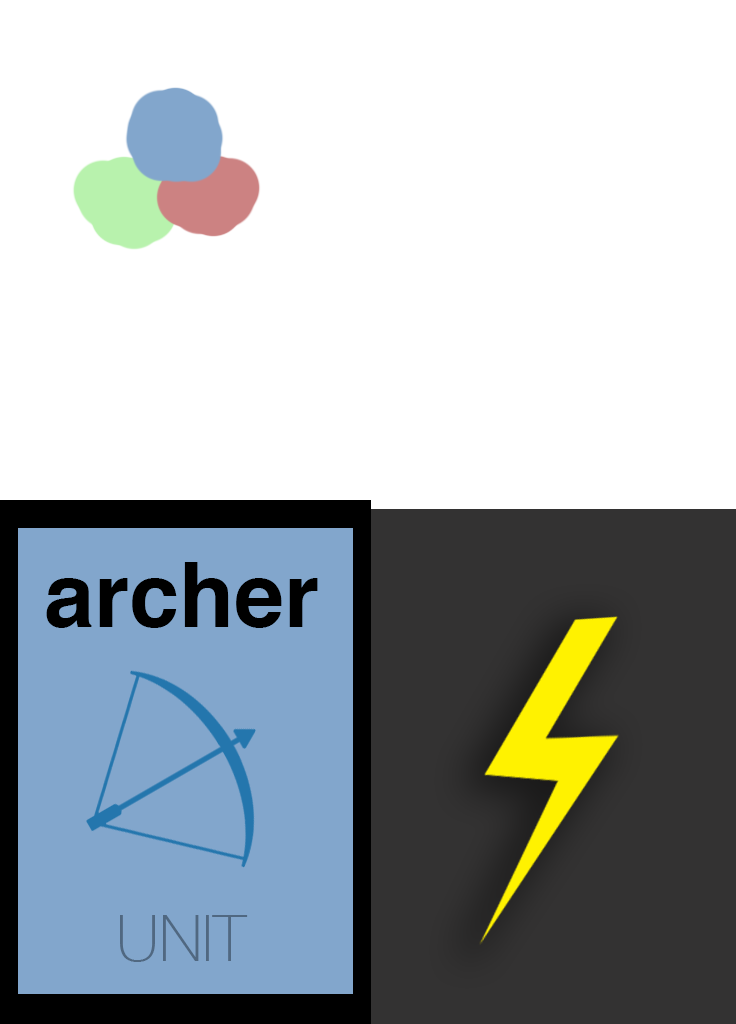
<style>
.page{position:relative;width:736px;height:1024px;background:#ffffff}
.page>*{position:absolute;margin:0}
.t1{font:90px "Helvetica-Bold";color:#000000}
.t2{font:64px "HelveticaNeue-Thin";color:#506881}
</style>
<div class="page">
<p class="t1" style="left:46px;top:562px;width:272px;height:66px">archer</p>
<p class="t2" style="left:120px;top:915px;width:128px;height:47px">UNIT</p>
</div>
